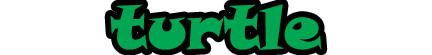
<style>
.page{position:relative;width:432px;height:55px;background:#ffffff}
.page>*{position:absolute;margin:0}
.t1{font:60px "SnapITC-Regular";color:#00a651}
</style>
<div class="page">
<p class="t1" style="left:110px;top:4px;width:212px;height:46px">turtle</p>
</div>
